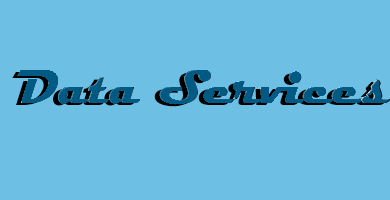
<style>
.page{position:relative;width:390px;height:200px;background:#6ebfe4}
.page>*{position:absolute;margin:0}
.t1{font:48px "Magneto-Bold"}
</style>
<div class="page">
<p class="t1" style="left:12px;top:72px;width:373px;height:35px">Data Services</p>
</div>
